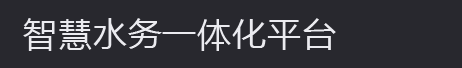
<style>
.page{position:relative;width:462px;height:68px;background:#28282e}
.page>*{position:absolute;margin:0}
.t1{font:34px "MicrosoftYaHei";letter-spacing:0.025em;color:#ebebf0}
</style>
<div class="page">
<p class="t1" style="left:23px;top:18px;width:313px;height:33px">智慧水务一体化平台</p>
</div>
